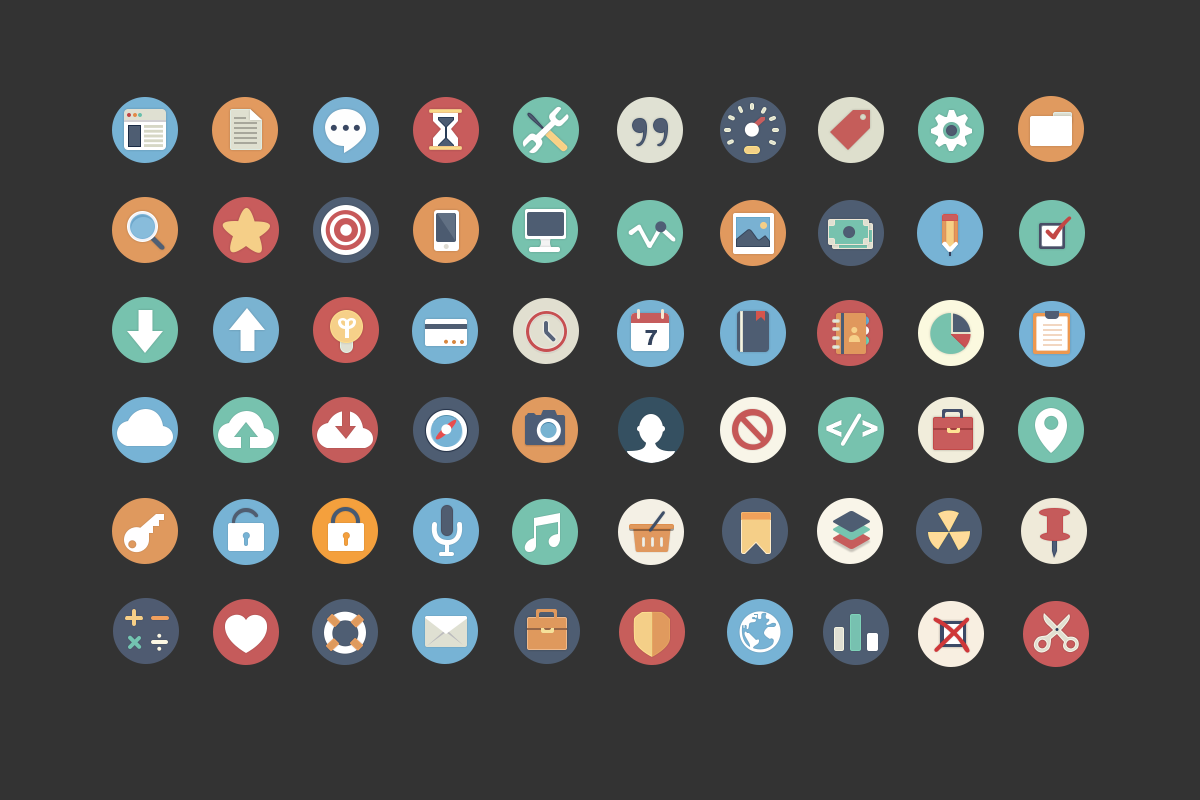
<style>
.page{position:relative;width:1200px;height:800px;background:#333333}
.page>*{position:absolute;margin:0}
.t1{font:20px "Arial-Black";color:#34445e}
.t2{font:28.3px "Arial-Black";color:#ffffff;scale:0.96 1}
</style>
<div class="page">
<p class="t1" style="left:645px;top:330px;width:12px;height:15px">7</p>
<p class="t2" style="left:826px;top:420px;width:52px;height:17px">&lt;  &gt;</p>
</div>
